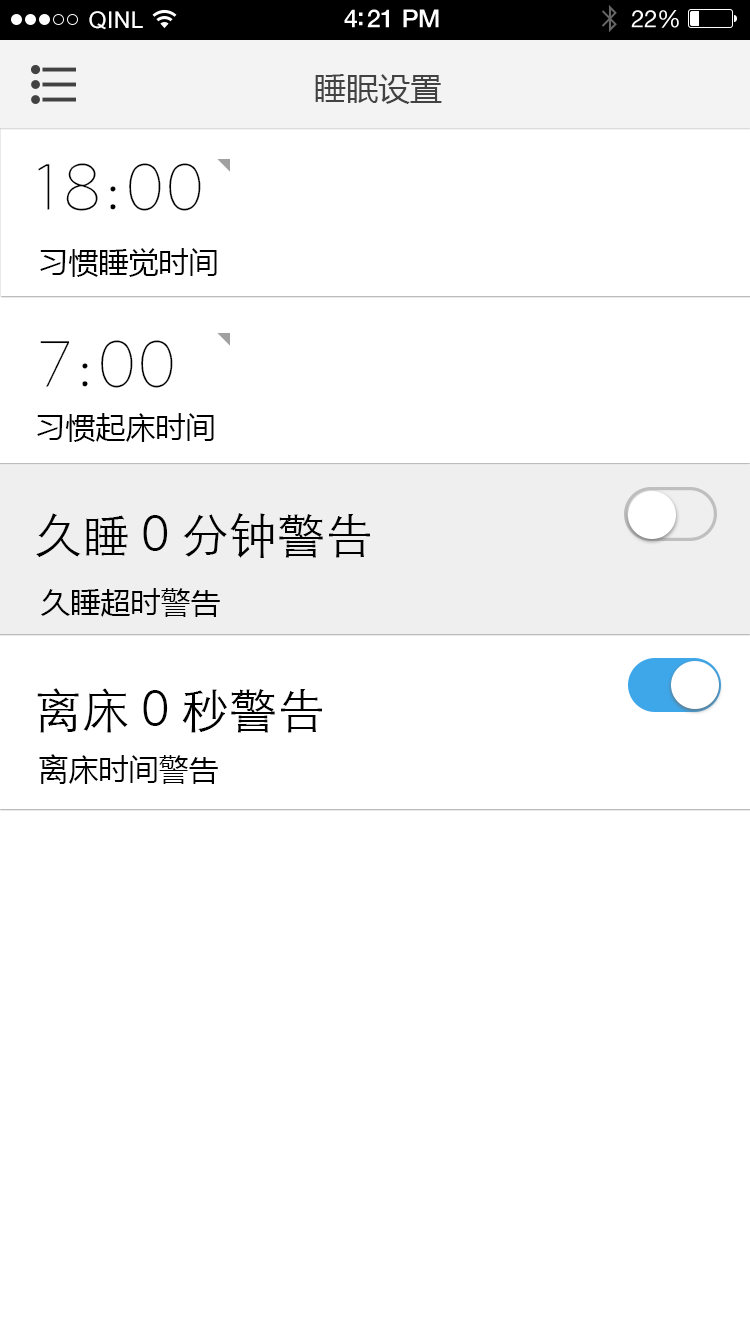
<style>
.page{position:relative;width:750px;height:1334px;background:#ffffff}
.page>*{position:absolute;margin:0}
.t1{font:23px "ArialUnicodeMS";letter-spacing:0.02em;color:#ffffff}
.t2{font:25px "HelveticaNeue-Medium";letter-spacing:-0.02em;color:#ffffff}
.t3{font:24px "HelveticaNeue";letter-spacing:-0.02em;color:#ffffff}
.t4{font:32px "MicrosoftYaHei";color:#424242}
.t5{font:72px "BigruixianthinGB1.0";color:#000000}
.t6{font:30px "MicrosoftYaHei";color:#000000}
.t7{font:48px "STXihei";color:#000000}
</style>
<div class="page">
<p class="t1" style="left:89px;top:11px;width:54px;height:19px">QINL</p>
<p class="t2" style="left:344px;top:9px;width:95px;height:19px">4:21 PM</p>
<p class="t3" style="left:631px;top:10px;width:48px;height:18px">22%</p>
<p class="t4" style="left:315px;top:74px;width:127px;height:30px">睡眠设置</p>
<p class="t5" style="left:38px;top:163px;width:163px;height:48px">18:00</p>
<p class="t6" style="left:40px;top:248px;width:177px;height:29px">习惯睡觉时间</p>
<p class="t5" style="left:40px;top:340px;width:133px;height:48px">7:00</p>
<p class="t6" style="left:37px;top:413px;width:177px;height:29px">习惯起床时间</p>
<p class="t7" style="left:36px;top:513px;width:334px;height:45px">久睡0分钟警告</p>
<p class="t6" style="left:41px;top:588px;width:179px;height:29px">久睡超时警告</p>
<p class="t7" style="left:37px;top:688px;width:285px;height:45px">离床0秒警告</p>
<p class="t6" style="left:39px;top:754px;width:179px;height:30px">离床时间警告</p>
</div>
